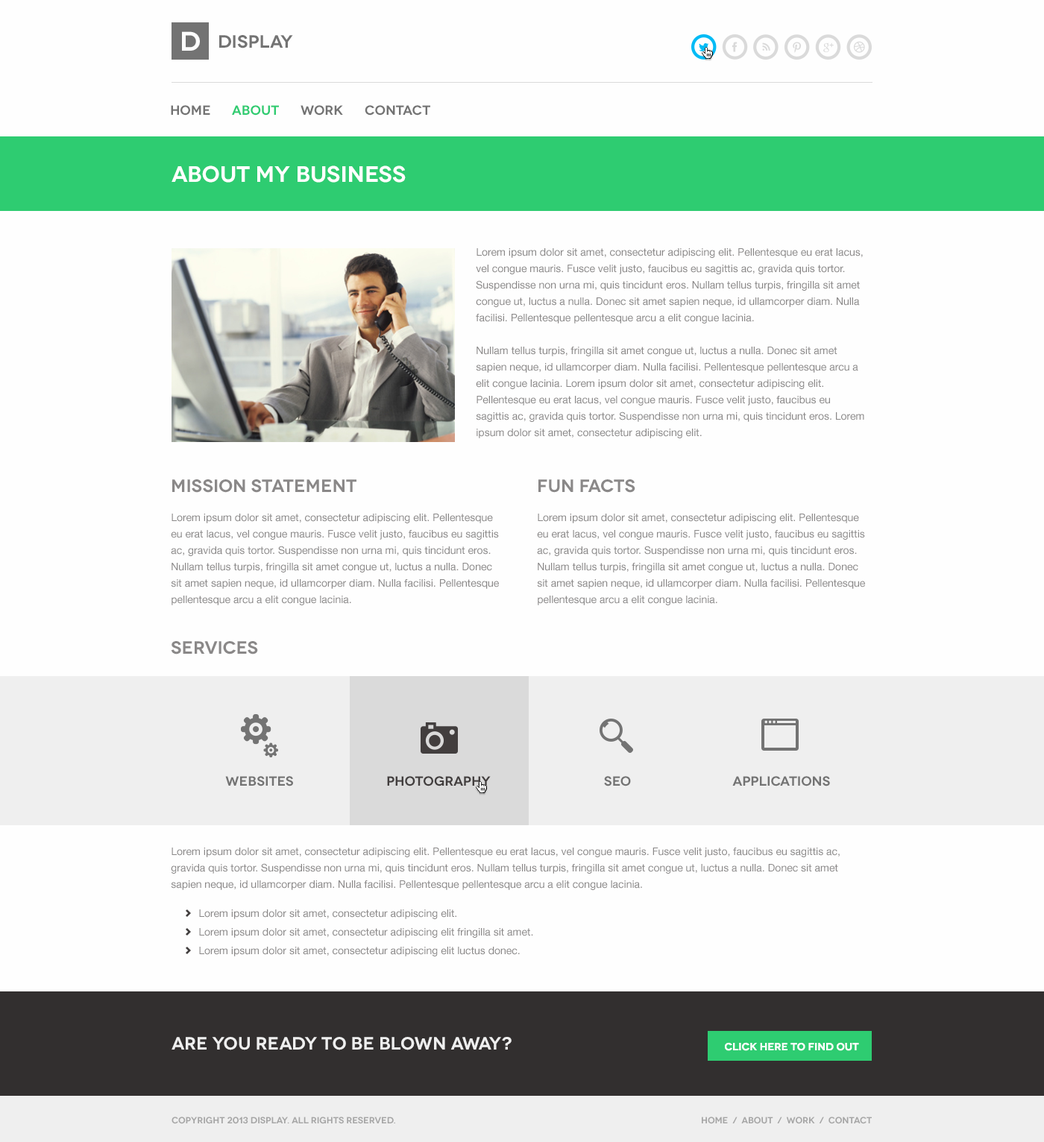
<style>
.page{position:relative;width:1044px;height:1142px;background:#fefefe}
.page>*{position:absolute;margin:0}
.t1{font:26.8px "Novecentowide-DemiBold";color:#ffffff}
.t2{font:17.9px "Novecentowide-DemiBold";color:#737373}
.t3{font:13.4px "Novecentowide-DemiBold";color:#737373}
.t4{font:13.4px "Novecentowide-DemiBold";color:#2ecc71}
.t5{font:22.4px "Novecentowide-DemiBold";color:#ffffff}
.t6{font:10.4px/16.4px "HelveticaNeue";color:#8a8888}
.t7{font:17.9px "Novecentowide-DemiBold";color:#8a8888}
.t8{font:13.4px "Novecentowide-DemiBold";color:#423e3e}
.t9{font:10.4px "HelveticaNeue";color:#8a8888}
.t10{font:17.9px "Novecentowide-DemiBold";color:#efefef}
.t11{font:10.4px "Novecentowide-DemiBold";color:#ffffff;text-transform:uppercase}
.t12{font:8.9px "Novecentowide-DemiBold";color:#a5a5a5;text-transform:uppercase}
</style>
<div class="page">
<p class="t1" style="left:182px;top:31px;width:18px;height:20px">D</p>
<p class="t2" style="left:219px;top:35px;width:74px;height:13px">Display</p>
<p class="t3" style="left:171px;top:105px;width:39px;height:11px">Home</p>
<p class="t4" style="left:232px;top:105px;width:47px;height:11px">About</p>
<p class="t3" style="left:300px;top:105px;width:43px;height:11px">Work</p>
<p class="t3" style="left:365px;top:105px;width:65px;height:11px">Contact</p>
<p class="t5" style="left:171px;top:166px;width:235px;height:17px">About My Business</p>
<p class="t6" style="left:476px;top:248px;width:388px;height:190px">Lorem ipsum dolor sit amet, consectetur adipiscing elit. Pellentesque eu erat lacus, vel congue mauris. Fusce velit justo, faucibus eu sagittis ac, gravida quis tortor. Suspendisse non urna mi, quis tincidunt eros. Nullam tellus turpis, fringilla sit amet congue ut, luctus a nulla. Donec sit amet sapien neque, id ullamcorper diam. Nulla facilisi. Pellentesque pellentesque arcu a elit congue lacinia.<br><br>Nullam tellus turpis, fringilla sit amet congue ut, luctus a nulla. Donec sit amet sapien neque, id ullamcorper diam. Nulla facilisi. Pellentesque pellentesque arcu a elit congue lacinia. Lorem ipsum dolor sit amet, consectetur adipiscing elit. Pellentesque eu erat lacus, vel congue mauris. Fusce velit justo, faucibus eu sagittis ac, gravida quis tortor. Suspendisse non urna mi, quis tincidunt eros. Lorem ipsum dolor sit amet, consectetur adipiscing elit.</p>
<p class="t7" style="left:172px;top:479px;width:184px;height:14px">Mission Statement</p>
<p class="t7" style="left:538px;top:479px;width:97px;height:14px">Fun FActs</p>
<p class="t6" style="left:171px;top:514px;width:328px;height:91px">Lorem ipsum dolor sit amet, consectetur adipiscing elit. Pellentesque eu erat lacus, vel congue mauris. Fusce velit justo, faucibus eu sagittis ac, gravida quis tortor. Suspendisse non urna mi, quis tincidunt eros. Nullam tellus turpis, fringilla sit amet congue ut, luctus a nulla. Donec sit amet sapien neque, id ullamcorper diam. Nulla facilisi. Pellentesque pellentesque arcu a elit congue lacinia.</p>
<p class="t6" style="left:537px;top:514px;width:328px;height:91px">Lorem ipsum dolor sit amet, consectetur adipiscing elit. Pellentesque eu erat lacus, vel congue mauris. Fusce velit justo, faucibus eu sagittis ac, gravida quis tortor. Suspendisse non urna mi, quis tincidunt eros. Nullam tellus turpis, fringilla sit amet congue ut, luctus a nulla. Donec sit amet sapien neque, id ullamcorper diam. Nulla facilisi. Pellentesque pellentesque arcu a elit congue lacinia.</p>
<p class="t7" style="left:171px;top:641px;width:87px;height:14px">Services</p>
<p class="t3" style="left:225px;top:776px;width:68px;height:11px">Websites</p>
<p class="t8" style="left:387px;top:776px;width:104px;height:11px">Photography</p>
<p class="t3" style="left:604px;top:776px;width:27px;height:11px">SEO</p>
<p class="t3" style="left:732px;top:776px;width:98px;height:11px">Applications</p>
<p class="t6" style="left:171px;top:848px;width:669px;height:42px">Lorem ipsum dolor sit amet, consectetur adipiscing elit. Pellentesque eu erat lacus, vel congue mauris. Fusce velit justo, faucibus eu sagittis ac, gravida quis tortor. Suspendisse non urna mi, quis tincidunt eros. Nullam tellus turpis, fringilla sit amet congue ut, luctus a nulla. Donec sit amet sapien neque, id ullamcorper diam. Nulla facilisi. Pellentesque pellentesque arcu a elit congue lacinia.</p>
<p class="t9" style="left:199px;top:910px;width:257px;height:9px">Lorem ipsum dolor sit amet, consectetur adipiscing elit.</p>
<p class="t9" style="left:199px;top:928px;width:334px;height:10px">Lorem ipsum dolor sit amet, consectetur adipiscing elit fringilla sit amet.</p>
<p class="t9" style="left:199px;top:947px;width:321px;height:10px">Lorem ipsum dolor sit amet, consectetur adipiscing elit luctus donec.</p>
<p class="t10" style="left:171px;top:1037px;width:341px;height:14px">Are You Ready To Be Blown Away?</p>
<p class="t11" style="left:725px;top:1042px;width:134px;height:9px">Click Here to Find Out</p>
<p class="t12" style="left:171px;top:1117px;width:224px;height:7px">Copyright 2013 Display. All Rights Reserved.</p>
<p class="t12" style="left:702px;top:1117px;width:170px;height:7px">Home  /  About  /  Work  /  Contact</p>
</div>
